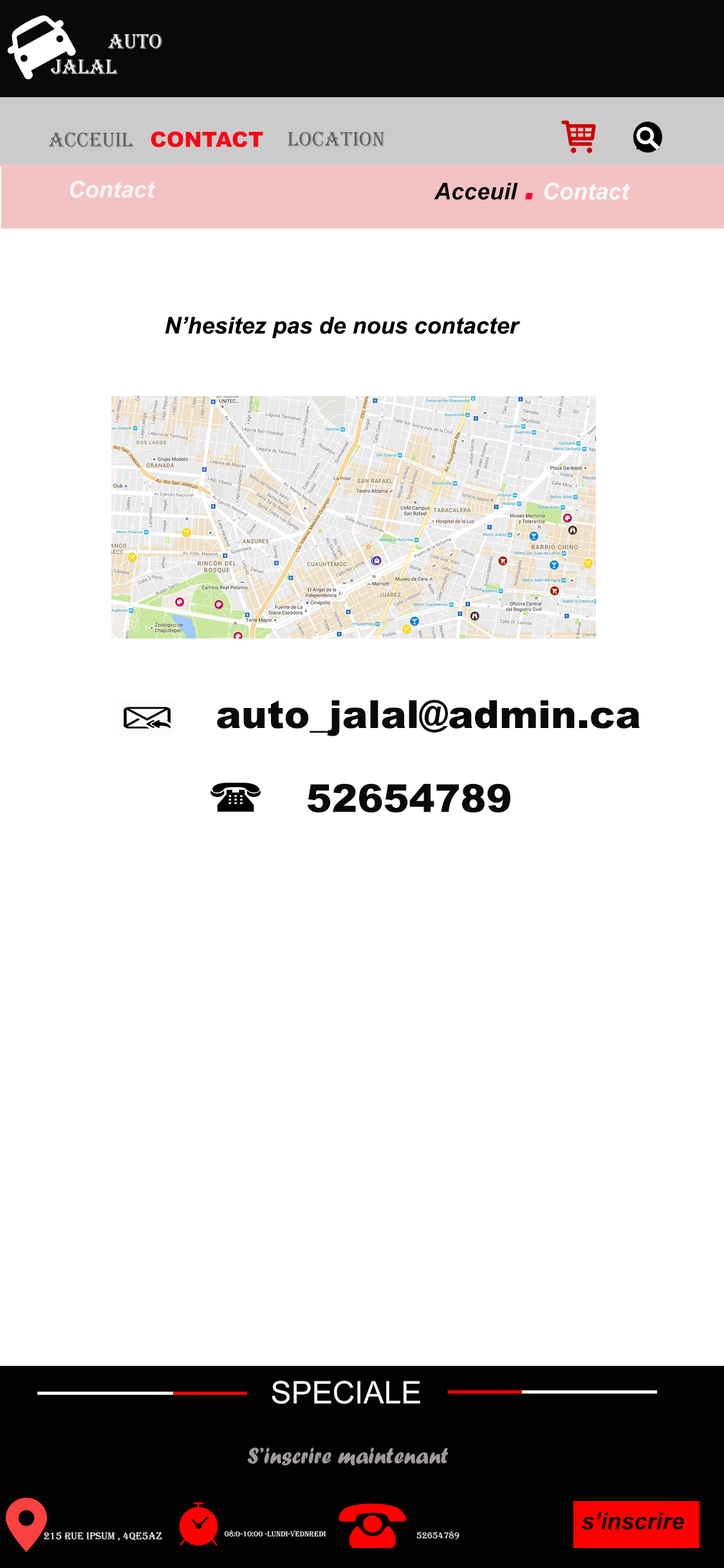
<style>
.page{position:relative;width:724px;height:1568px;background:#ffffff}
.page>*{position:absolute;margin:0}
.t1{font:21.2px "Algerian";color:#605f5f}
.t2{font:21.2px "Arial-Black";color:#f70718}
.t3{font:23.2px "Arial-BoldItalicMT";color:#f9f2f4}
.t4{font:23.2px "Arial-BoldItalicMT";color:#090808}
.t5{font:46.3px "Arial-BoldItalicMT";color:#fd003c}
.t6{font:23.2px "Arial-BoldItalicMT";color:#fbf7f8}
.t7{font:23.2px "Arial-BoldItalicMT";color:#010101}
.t8{font:38.6px "Arial-Black";color:#0b0a0a}
.t9{font:30.9px "ArialMT";color:#f7f4f5}
.t10{font:23.2px "ForteMT";color:#9e999a}
.t11{font:23.2px "Arial-BoldItalicMT";color:#0e0b0c}
.t12{font:10.3px "Algerian";color:#f6eeee}
.t13{font:7.7px "Algerian";color:#f6eeee}
.t14{font:9px "Algerian";color:#f6eeee}
</style>
<div class="page">
<p class="t1" style="left:48px;top:132px;width:86px;height:15px">ACCEUIL</p>
<p class="t2" style="left:151px;top:131px;width:112px;height:16px">CONTACT</p>
<p class="t1" style="left:288px;top:131px;width:97px;height:16px">Location</p>
<p class="t3" style="left:70px;top:180px;width:86px;height:18px">Contact</p>
<p class="t4" style="left:434px;top:182px;width:196px;height:18px">Acceuil <span class="t5">. </span><span class="t6">Contact</span></p>
<p class="t7" style="left:165px;top:317px;width:356px;height:22px">N’hesitez pas de nous contacter</p>
<p class="t8" style="left:217px;top:700px;width:423px;height:36px">auto_jalal@admin.ca</p>
<p class="t8" style="left:307px;top:783px;width:203px;height:30px">52654789</p>
<p class="t9" style="left:272px;top:1381px;width:148px;height:23px">SPECIALE</p>
<p class="t10" style="left:247px;top:1448px;width:202px;height:18px">S’inscrire maintenant</p>
<p class="t11" style="left:581px;top:1513px;width:103px;height:17px">s’inscrire</p>
<p class="t12" style="left:44px;top:1531px;width:119px;height:10px">215 Rue Ipsum , 4QE5Az</p>
<p class="t13" style="left:225px;top:1530px;width:101px;height:7px">08:0-10:00 -Lundi-VEDNREDI</p>
<p class="t14" style="left:416px;top:1531px;width:44px;height:9px">52654789</p>
</div>
